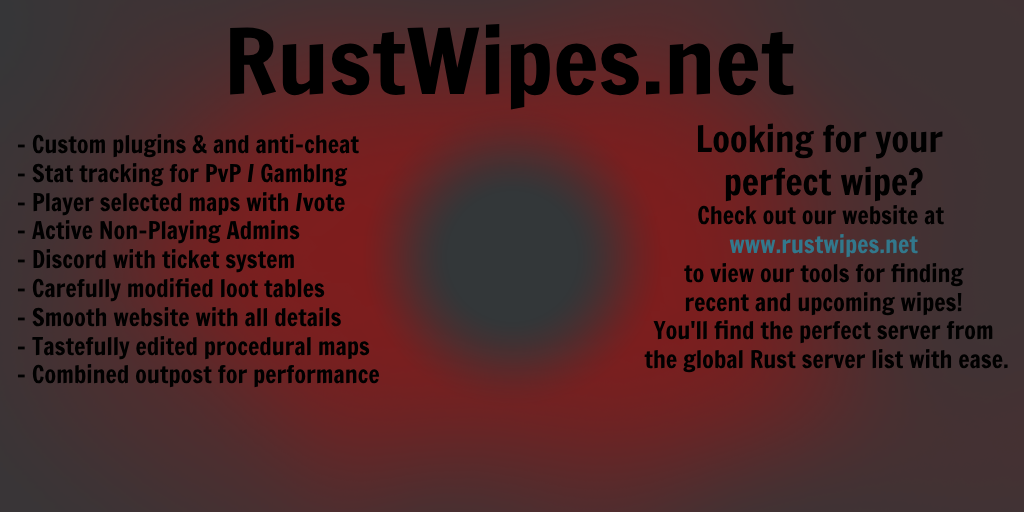
<style>
.page{position:relative;width:1024px;height:512px}
.page>*{position:absolute;margin:0}
.t1{font:88.7px "FrancoisOne-Regular";color:#000000;scale:1.08 1}
.t2{font:24px "FrancoisOne-Regular";color:#000000}
.t3{font:36px "FrancoisOne-Regular";color:#000000}
.t4{font:24px "FrancoisOne-Regular";color:#32788c}
</style>
<div class="page">
<p class="t1" style="left:230px;top:23px;width:564px;height:87px">RustWipes.net</p>
<p class="t2" style="left:644px;top:123px;width:364px;height:250px;text-align:center"><span class="t3">Looking for your <br>perfect wipe?<br></span>Check out our website at <br><span class="t4">www.rustwipes.net<br></span>to view our tools for finding<br>recent and upcoming wipes!<br>You'll find the perfect server from<br> the global Rust server list with ease.</p>
<p class="t2" style="left:17px;top:134px;width:363px;height:254px">- Custom plugins &amp; and anti-cheat<br>- Stat tracking for PvP / Gamblng<br>- Player selected maps with /vote <br>- Active Non-Playing Admins<br>- Discord with ticket system<br>- Carefully modified loot tables<br>- Smooth website with all details<br>- Tastefully edited procedural maps<br>- Combined outpost for performance</p>
</div>
